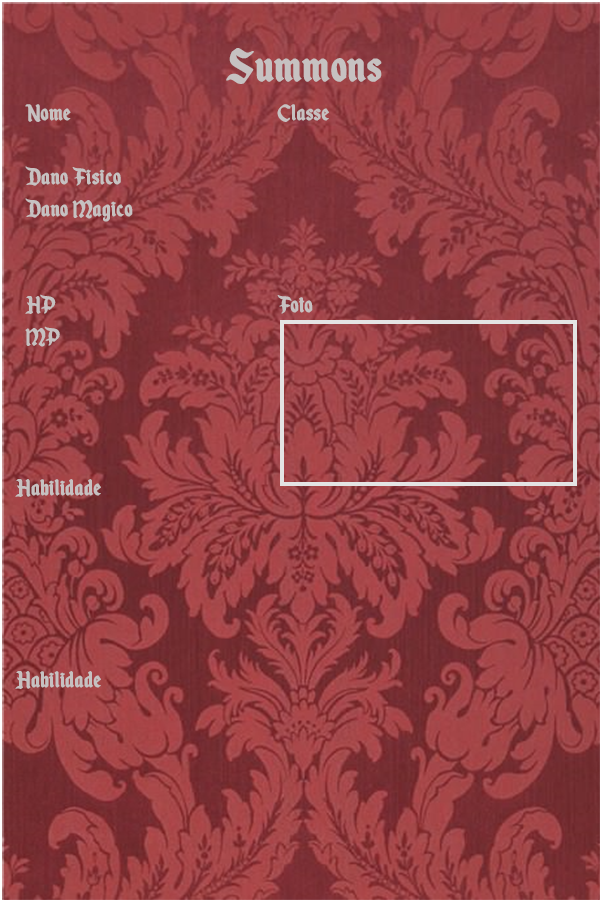
<style>
.page{position:relative;width:600px;height:900px}
.page>*{position:absolute;margin:0}
.t1{font:53.3px "EnchantedLand";color:#c6c1c1;font-weight:bold}
.t2{font:26.7px "EnchantedLand";color:#c6c1c1;font-weight:bold}
</style>
<div class="page">
<p class="t1" style="left:226px;top:48px;width:156px;height:36px">Summons</p>
<p class="t2" style="left:25px;top:104px;width:304px;height:243px">Nome      Classe<br><br>Dano Fisico<br>Dano Magico <br>     <br><br>HP       Foto      <br>MP</p>
<p class="t2" style="left:15px;top:479px;width:86px;height:210px">Habilidade <br><br><br><br><br><br>Habilidade</p>
</div>
